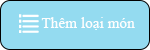
<style>
.page{position:relative;width:150px;height:50px;background:#94dbf0}
.page>*{position:absolute;margin:0}
.t1{font:15.3px "TimesNewRomanPSMT";color:#fefefe}
</style>
<div class="page">
<p class="t1" style="left:41px;top:17px;width:94px;height:13px">Thêm loại món</p>
</div>
